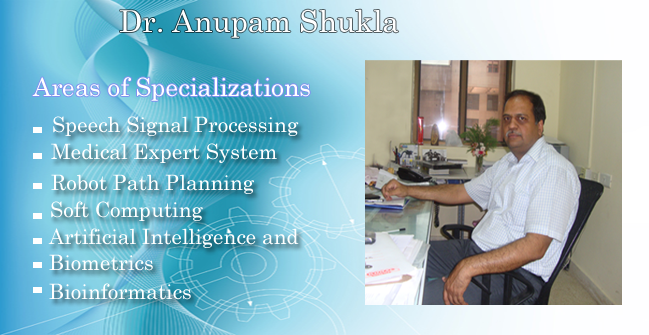
<style>
.page{position:relative;width:649px;height:335px}
.page>*{position:absolute;margin:0}
.t1{font:30px "Century";color:#ffffff}
.t2{font:25.2px "Century";color:#ffffff}
.t3{font:21px "Century";color:#ffffff}
</style>
<div class="page">
<p class="t1" style="left:120px;top:9px;width:279px;height:29px">Dr. Anupam Shukla</p>
<p class="t2" style="left:32px;top:77px;width:278px;height:24px">Areas of Specializations</p>
<p class="t3" style="left:53px;top:116px;width:246px;height:20px">Speech Signal Processing</p>
<p class="t3" style="left:51px;top:143px;width:226px;height:20px">Medical Expert System</p>
<p class="t3" style="left:51px;top:174px;width:203px;height:20px">Robot Path Planning</p>
<p class="t3" style="left:51px;top:201px;width:152px;height:20px">Soft Computing</p>
<p class="t3" style="left:48px;top:228px;width:251px;height:20px">Artificial Intelligence and</p>
<p class="t3" style="left:49px;top:254px;width:104px;height:17px">Biometrics</p>
<p class="t3" style="left:49px;top:283px;width:142px;height:17px">Bioinformatics</p>
</div>
